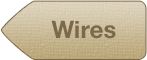
<style>
.page{position:relative;width:147px;height:60px}
.page>*{position:absolute;margin:0}
.t1{font:24px "HelveticaNeue-Bold";color:#7c684c}
</style>
<div class="page">
<p class="t1" style="left:51px;top:20px;width:65px;height:19px">Wires</p>
</div>
